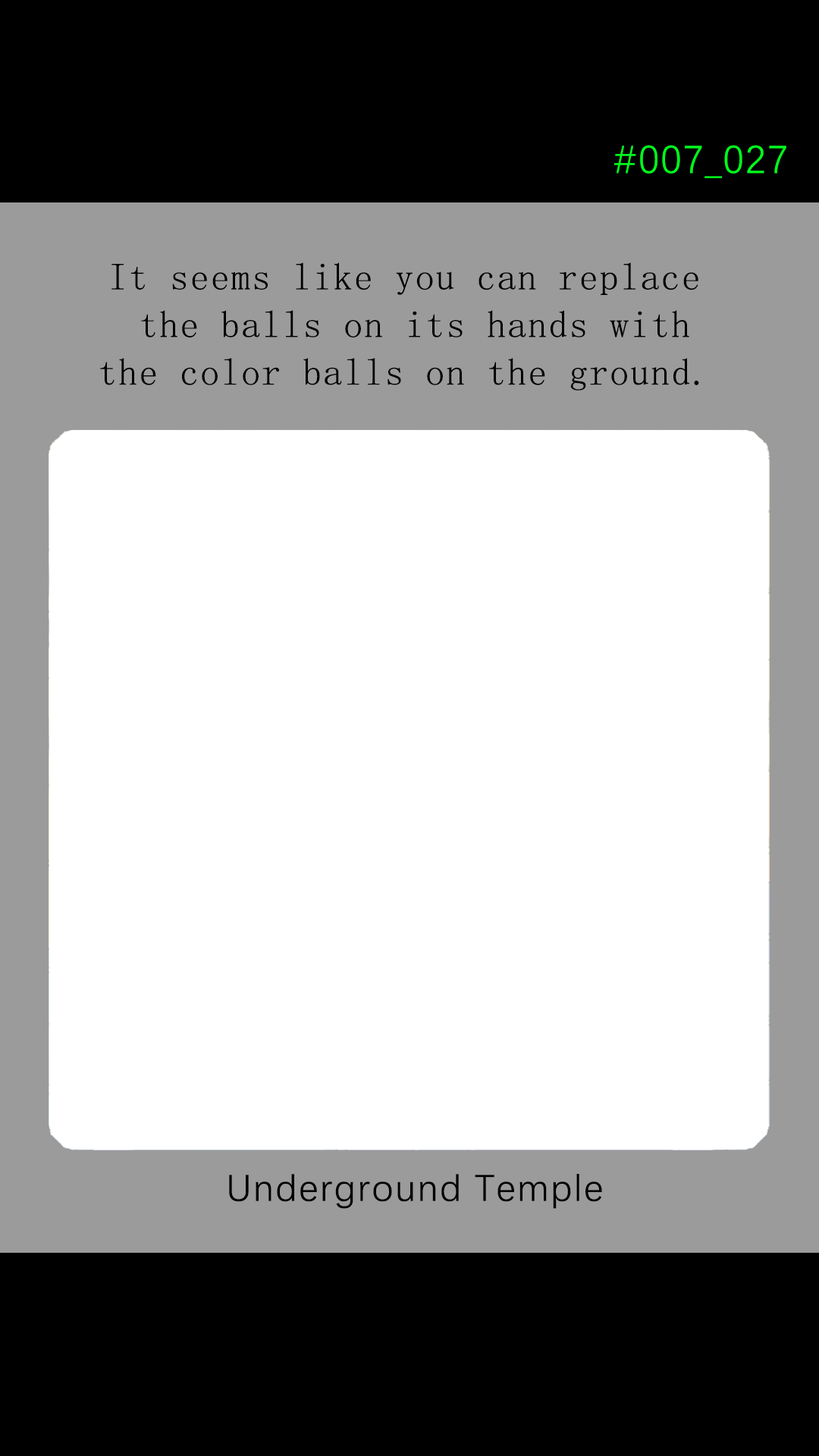
<style>
.page{position:relative;width:819px;height:1456px;background:#ffffff}
.page>*{position:absolute;margin:0}
.t1{font:39.2px "DengXian-Regular";letter-spacing:0.04em;color:#00ff1e}
.t2{font:37.9px/47.6px "SimSun";letter-spacing:0.04em;color:#000000}
.t3{font:37.9px "DengXian-Regular";letter-spacing:0.04em;color:#000000}
</style>
<div class="page">
<p class="t1" style="left:614px;top:145px;width:172px;height:33px">#007_027</p>
<p class="t2" style="left:100px;top:262px;width:599px;height:129px;text-align:center">It seems like you can replace <br>the balls on its hands with<br>the color balls on the ground.</p>
<p class="t3" style="left:229px;top:1174px;width:373px;height:35px">Underground Temple</p>
</div>
